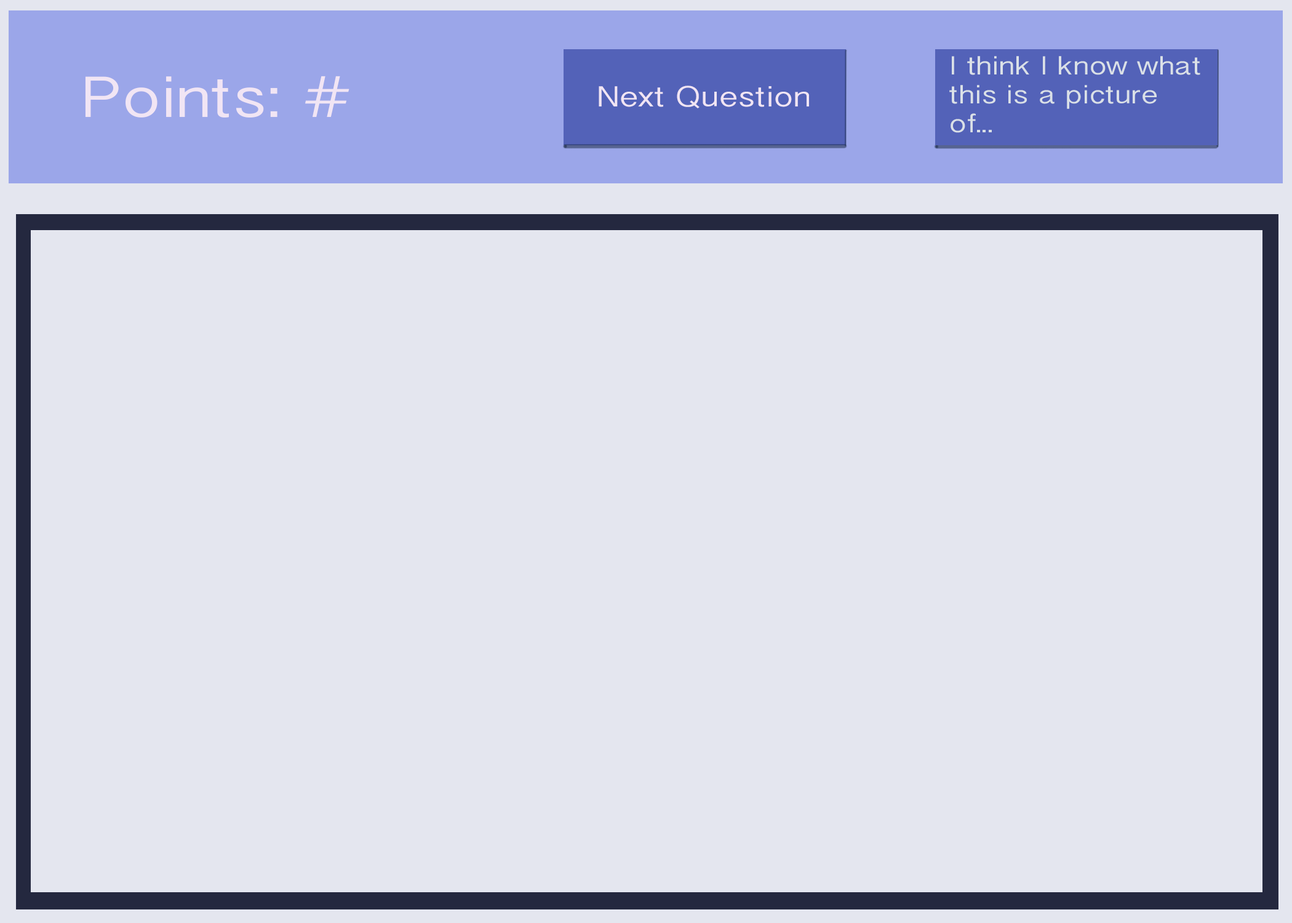
<style>
.page{position:relative;width:1292px;height:923px;background:#e4e6ef}
.page>*{position:absolute;margin:0}
.t1{font:23.1px "BanglaSangamMN";color:#dae0e7;scale:1.2 1}
.t2{font:51.3px "BanglaSangamMN";color:#f1e5f4;scale:1.2 1}
.t3{font:25.6px "BanglaSangamMN";color:#f1e5f4;scale:1.2 1}
</style>
<div class="page">
<p class="t1" style="left:949px;top:56px;width:251px;height:77px">I think I know what this is a picture of...</p>
<p class="t2" style="left:85px;top:76px;width:264px;height:42px">Points: #</p>
<p class="t3" style="left:599px;top:86px;width:210px;height:22px">Next Question</p>
</div>
